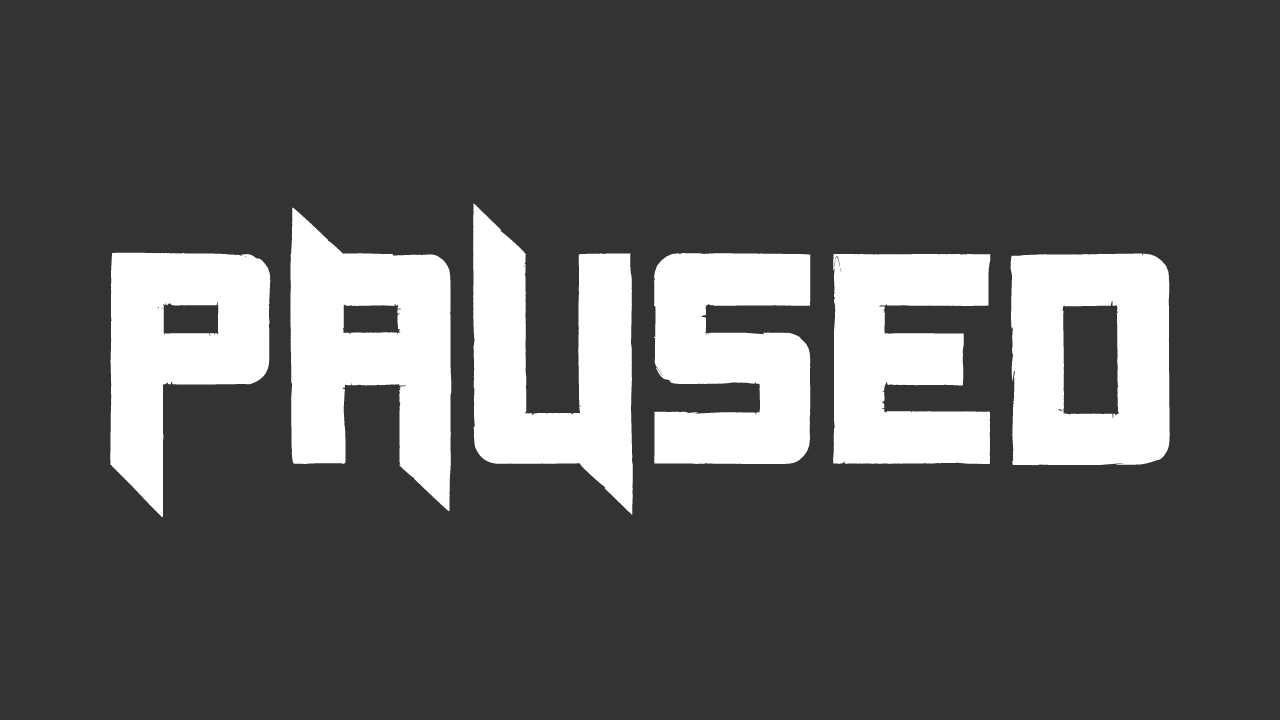
<style>
.page{position:relative;width:1280px;height:720px;background:#333333}
.page>*{position:absolute;margin:0}
.t1{font:300px "Duplexide";color:#ffffff}
</style>
<div class="page">
<p class="t1" style="left:110px;top:203px;width:1060px;height:315px">Paused</p>
</div>
